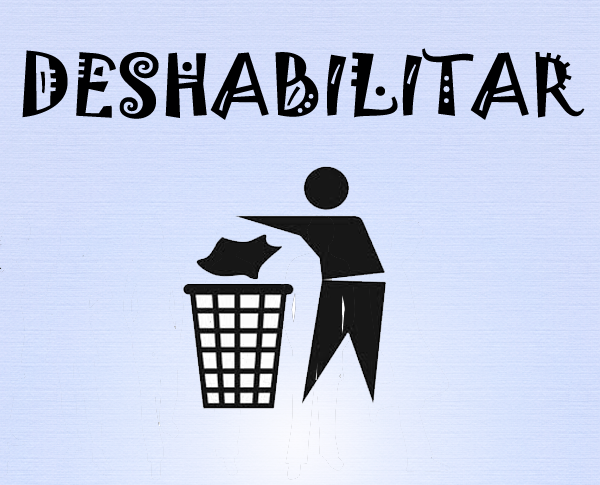
<style>
.page{position:relative;width:600px;height:485px}
.page>*{position:absolute;margin:0}
.t1{font:75px "Jokerman-Regular";color:#000001}
</style>
<div class="page">
<p class="t1" style="left:22px;top:48px;width:563px;height:72px">DESHABILITAR</p>
</div>
